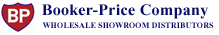
<style>
.page{position:relative;width:219px;height:35px;background:#ffffff}
.page>*{position:absolute;margin:0}
.t1{font:16px "TimesNewRomanPS-BoldMT";letter-spacing:0.02em;color:#0a0c61}
.t2{font:8px "TimesNewRomanPS-BoldMT";letter-spacing:0.02em;color:#0a0c61}
</style>
<div class="page">
<p class="t1" style="left:42px;top:4px;width:166px;height:15px">Booker-Price Company</p>
<p class="t2" style="left:42px;top:22px;width:172px;height:6px">WHOLESALE SHOWROOM DISTRIBUTORS</p>
</div>
